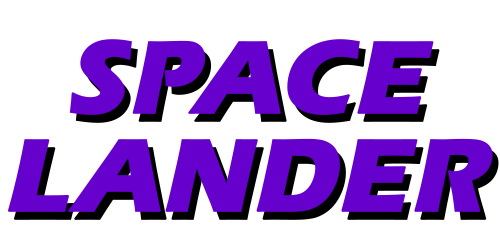
<style>
.page{position:relative;width:500px;height:250px;background:#ffffff}
.page>*{position:absolute;margin:0}
.t1{font:107.2px/97.5px "ErasITC-Bold";color:#6600cc;text-transform:uppercase;font-weight:bold;font-style:italic}
</style>
<div class="page">
<p class="t1" style="left:7px;top:39px;width:486px;height:173px;text-align:center">SPACE<br>LANDER</p>
</div>
